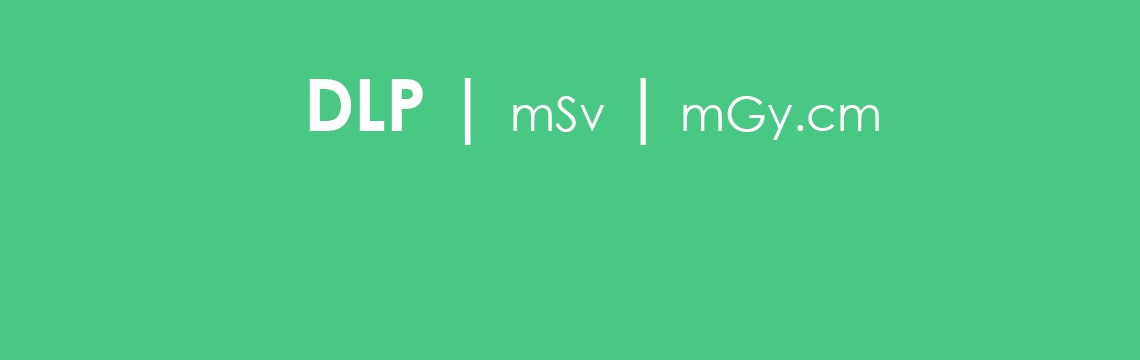
<style>
.page{position:relative;width:1140px;height:360px;background:#49c784}
.page>*{position:absolute;margin:0}
.t1{font:48px "CenturyGothic";color:#ffffff}
.t2{font:72px "CenturyGothic-Bold";color:#ffffff}
.t3{font:72px "CenturyGothic";color:#ffffff}
</style>
<div class="page">
<p class="t1" style="left:309px;top:78px;width:570px;height:67px"><span class="t2">DLP | </span>mSv <span class="t3">|</span> mGy.cm</p>
</div>
